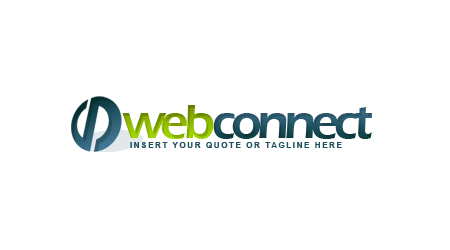
<style>
.page{position:relative;width:450px;height:250px;background:#ffffff}
.page>*{position:absolute;margin:0}
.t1{font:50px "ErasITC-Demi";letter-spacing:-0.1em}
.t2{font:50px "ErasITC-Demi";letter-spacing:-0.1em;color:#26596b}
.t3{font:8px "Arial-BoldMT";letter-spacing:0.2em;color:#1e515e}
</style>
<div class="page">
<p class="t1" style="left:122px;top:105px;width:92px;height:34px">web</p>
<p class="t2" style="left:213px;top:107px;width:159px;height:32px">connect</p>
<p class="t3" style="left:130px;top:142px;width:212px;height:6px">INSERT YOUR QUOTE OR TAGLINE HERE</p>
</div>
